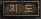
<style>
.page{position:relative;width:41px;height:19px}
.page>*{position:absolute;margin:0}
.t1{font:10px "NanumBarunGothic";letter-spacing:0.2em;color:#8c7b69}
</style>
<div class="page">
<p class="t1" style="left:9px;top:4px;width:24px;height:9px">지 도</p>
</div>
